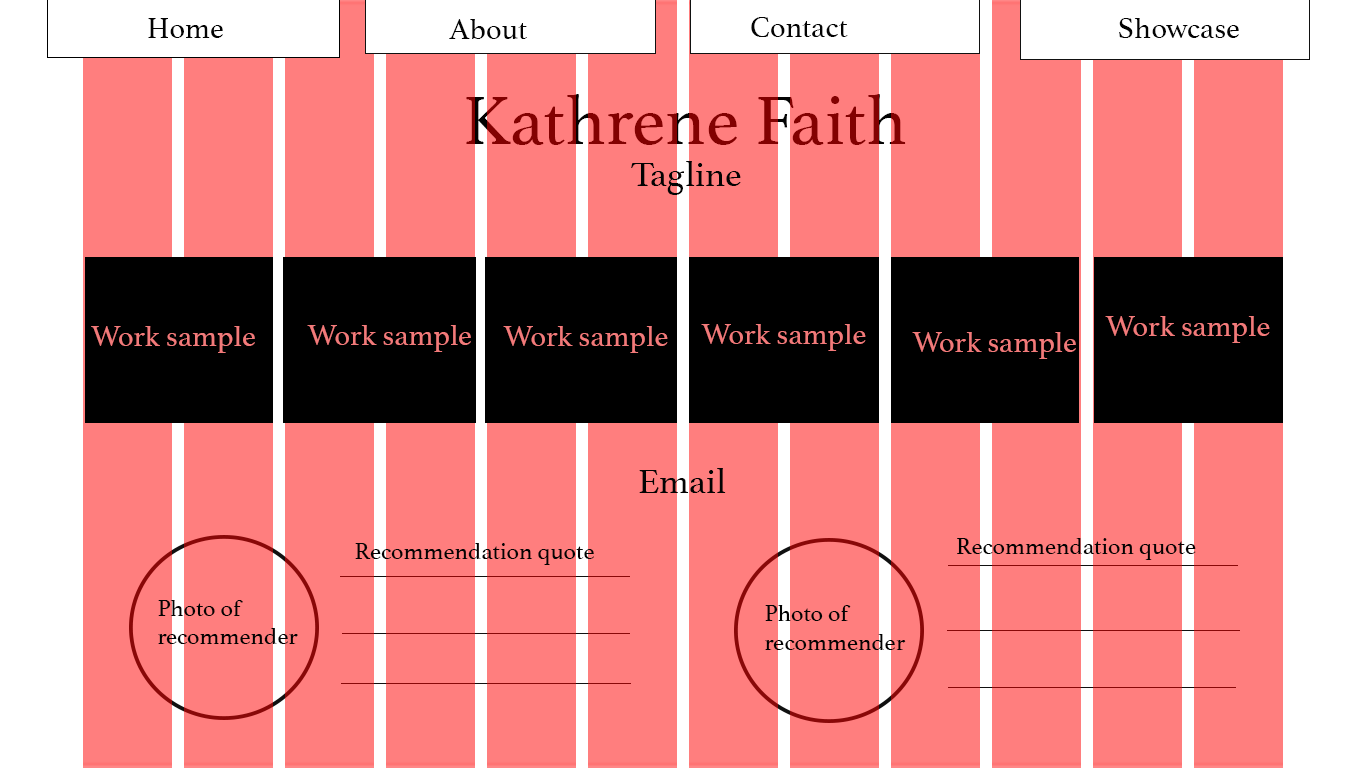
<style>
.page{position:relative;width:1366px;height:768px;background:#ff7e7e}
.page>*{position:absolute;margin:0}
.t1{font:30px "Athelas-Regular";color:#030303}
.t2{font:72px "Athelas-Regular";color:#820101}
.t3{font:36px "Athelas-Regular";color:#030303}
.t4{font:30px "Athelas-Regular";color:#f27a7a}
.t5{font:24px "Athelas-Regular";color:#030303}
</style>
<div class="page">
<p class="t1" style="left:751px;top:17px;width:97px;height:20px">Contact</p>
<p class="t1" style="left:148px;top:18px;width:75px;height:20px">Home</p>
<p class="t1" style="left:449px;top:19px;width:78px;height:20px">About</p>
<p class="t1" style="left:1119px;top:18px;width:120px;height:20px">Showcase</p>
<p class="t2" style="left:466px;top:94px;width:440px;height:51px">Kathrene Faith</p>
<p class="t3" style="left:631px;top:161px;width:110px;height:34px">Tagline</p>
<p class="t4" style="left:1105px;top:316px;width:165px;height:27px">Work sample</p>
<p class="t4" style="left:91px;top:326px;width:164px;height:27px">Work sample</p>
<p class="t4" style="left:307px;top:325px;width:164px;height:27px">Work sample</p>
<p class="t4" style="left:503px;top:326px;width:165px;height:27px">Work sample</p>
<p class="t4" style="left:701px;top:324px;width:165px;height:27px">Work sample</p>
<p class="t4" style="left:912px;top:332px;width:164px;height:27px">Work sample</p>
<p class="t3" style="left:639px;top:468px;width:87px;height:25px">Email</p>
<p class="t5" style="left:355px;top:543px;width:239px;height:22px">Recommendation quote</p>
<p class="t5" style="left:957px;top:538px;width:239px;height:22px">Recommendation quote</p>
<p class="t5" style="left:158px;top:600px;width:140px;height:44px">Photo of <br>recommender</p>
<p class="t5" style="left:765px;top:605px;width:141px;height:45px">Photo of <br>recommender</p>
</div>
